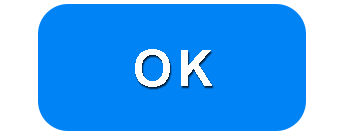
<style>
.page{position:relative;width:344px;height:135px;background:#0083f5}
.page>*{position:absolute;margin:0}
.t1{font:50px "Arial-BoldMT";letter-spacing:0.1em;color:#ffffff}
</style>
<div class="page">
<p class="t1" style="left:135px;top:49px;width:77px;height:38px">OK</p>
</div>
